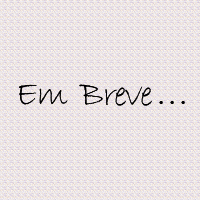
<style>
.page{position:relative;width:200px;height:200px}
.page>*{position:absolute;margin:0}
.t1{font:36px "BradleyHandITC";letter-spacing:-0.05em;color:#000000}
.t2{font:30px "FelixTitlingMT";letter-spacing:-0.05em;color:#000000}
</style>
<div class="page">
<p class="t1" style="left:19px;top:84px;width:166px;height:22px">Em  Breve <span class="t2">. . .</span></p>
</div>
